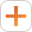
<style>
.page{position:relative;width:32px;height:32px;background:#ffffff}
.page>*{position:absolute;margin:0}
.t1{font:36px "Geneva";letter-spacing:-0.075em;color:#e87931;font-weight:bold}
</style>
<div class="page">
<p class="t1" style="left:5px;top:6px;width:22px;height:21px">+</p>
</div>
